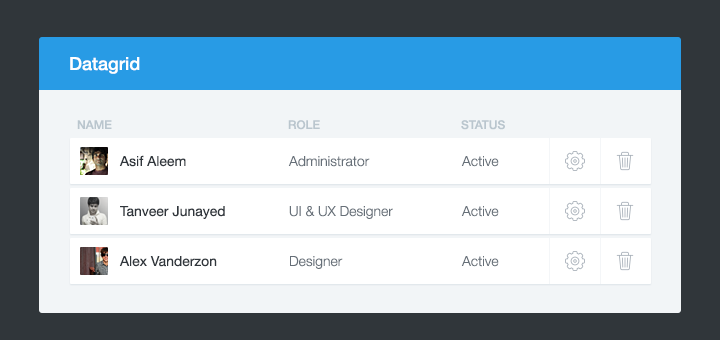
<style>
.page{position:relative;width:720px;height:340px;background:#ffffff}
.page>*{position:absolute;margin:0}
.t1{font:18px "HelveticaNeue-Medium";color:#ffffff}
.t2{font:12px "HelveticaNeue-Medium";color:#bac6ce;text-transform:uppercase}
.t3{font:14px "HelveticaNeue";color:#30363c}
.t4{font:14px "HelveticaNeue-Light";color:#666f78}
</style>
<div class="page">
<p class="t1" style="left:70px;top:57px;width:70px;height:17px">Datagrid</p>
<p class="t2" style="left:77px;top:120px;width:35px;height:9px">Name</p>
<p class="t2" style="left:288px;top:120px;width:32px;height:10px">Role</p>
<p class="t2" style="left:461px;top:120px;width:44px;height:10px">status</p>
<p class="t3" style="left:119px;top:155px;width:67px;height:12px">Asif Aleem</p>
<p class="t4" style="left:288px;top:156px;width:82px;height:11px">Administrator</p>
<p class="t4" style="left:461px;top:156px;width:38px;height:11px">Active</p>
<p class="t3" style="left:120px;top:206px;width:105px;height:13px">Tanveer Junayed</p>
<p class="t4" style="left:289px;top:206px;width:104px;height:13px">UI &amp; UX Designer</p>
<p class="t4" style="left:461px;top:206px;width:38px;height:11px">Active</p>
<p class="t3" style="left:119px;top:256px;width:98px;height:11px">Alex Vanderzon</p>
<p class="t4" style="left:290px;top:256px;width:53px;height:13px">Designer</p>
<p class="t4" style="left:461px;top:256px;width:38px;height:11px">Active</p>
</div>
